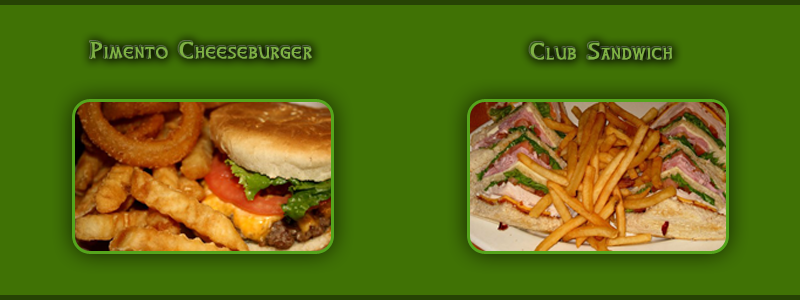
<style>
.page{position:relative;width:800px;height:300px;background:#407205}
.page>*{position:absolute;margin:0}
.t1{font:20px "CelticHand";letter-spacing:0.1em;font-variant:small-caps;font-weight:bold}
.t2{font:20px "CelticHand";letter-spacing:0.1em;color:#7fb144;font-variant:small-caps;font-weight:bold}
</style>
<div class="page">
<p class="t1" style="left:90px;top:41px;width:221px;height:18px">Pimento Cheeseburger</p>
<p class="t2" style="left:91px;top:42px;width:221px;height:18px">Pimento Cheeseburger</p>
<p class="t1" style="left:529px;top:42px;width:142px;height:18px">Club Sandwich</p>
<p class="t2" style="left:530px;top:43px;width:142px;height:18px">Club Sandwich</p>
</div>
